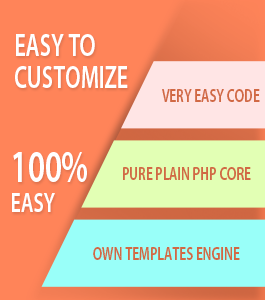
<style>
.page{position:relative;width:265px;height:300px;background:#ff8459}
.page>*{position:absolute;margin:0}
.t1{font:31.5px/24px "MyriadPro-Semibold";color:#ffffff;text-transform:uppercase;scale:0.7 1}
.t2{font:18.9px "MyriadPro-Semibold";color:#d16944;text-transform:uppercase;scale:0.7 1}
.t3{font:45.4px/30px "MyriadPro-Semibold";color:#ffffff;text-transform:uppercase;scale:0.7 1}
.t4{font:28.4px/30px "MyriadPro-Semibold";color:#ffffff;text-transform:uppercase;scale:0.7 1}
</style>
<div class="page">
<p class="t1" style="left:15px;top:34px;width:113px;height:54px">easy to<br>customize</p>
<p class="t2" style="left:162px;top:89px;width:98px;height:13px">very easy code</p>
<p class="t3" style="left:12px;top:152px;width:75px;height:60px">100%<br><span class="t4">easy</span></p>
<p class="t2" style="left:123px;top:167px;width:128px;height:13px">pure plain php coRe</p>
<p class="t2" style="left:93px;top:247px;width:147px;height:13px">own templates engine</p>
</div>
